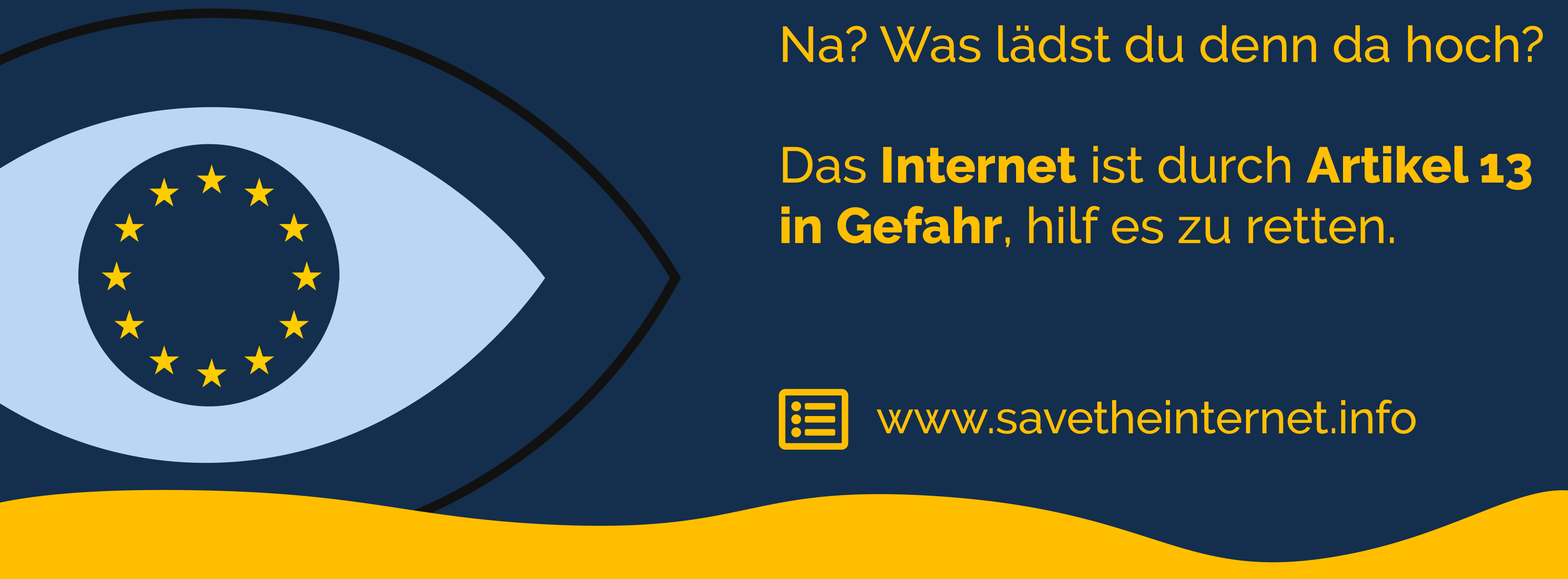
<style>
.page{position:relative;width:1568px;height:579px;background:#142e4d}
.page>*{position:absolute;margin:0}
.t1{font:50.3px "Raleway-Medium";color:#ffbf00}
.t2{font:50.3px "Raleway-ExtraBold";color:#ffbf00}
.t3{font:45.5px "Raleway-Medium";color:#ffbf00}
</style>
<div class="page">
<p class="t1" style="left:781px;top:25px;width:762px;height:222px">Na? Was lädst du denn da hoch?<br><br>Das <span class="t2">Internet</span> ist durch <span class="t2">Artikel 13 in Gefahr</span>, hilf es zu retten.</p>
<p class="t3" style="left:877px;top:400px;width:539px;height:34px">www.savetheinternet.info</p>
</div>
